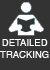
<style>
.page{position:relative;width:50px;height:70px;background:#333333}
.page>*{position:absolute;margin:0}
.t1{font:9.5px "Helvetica";color:#ffffff}
</style>
<div class="page">
<p class="t1" style="left:0px;top:39px;width:49px;height:19px;text-align:center">DETAILED<br>TRACKING</p>
</div>
